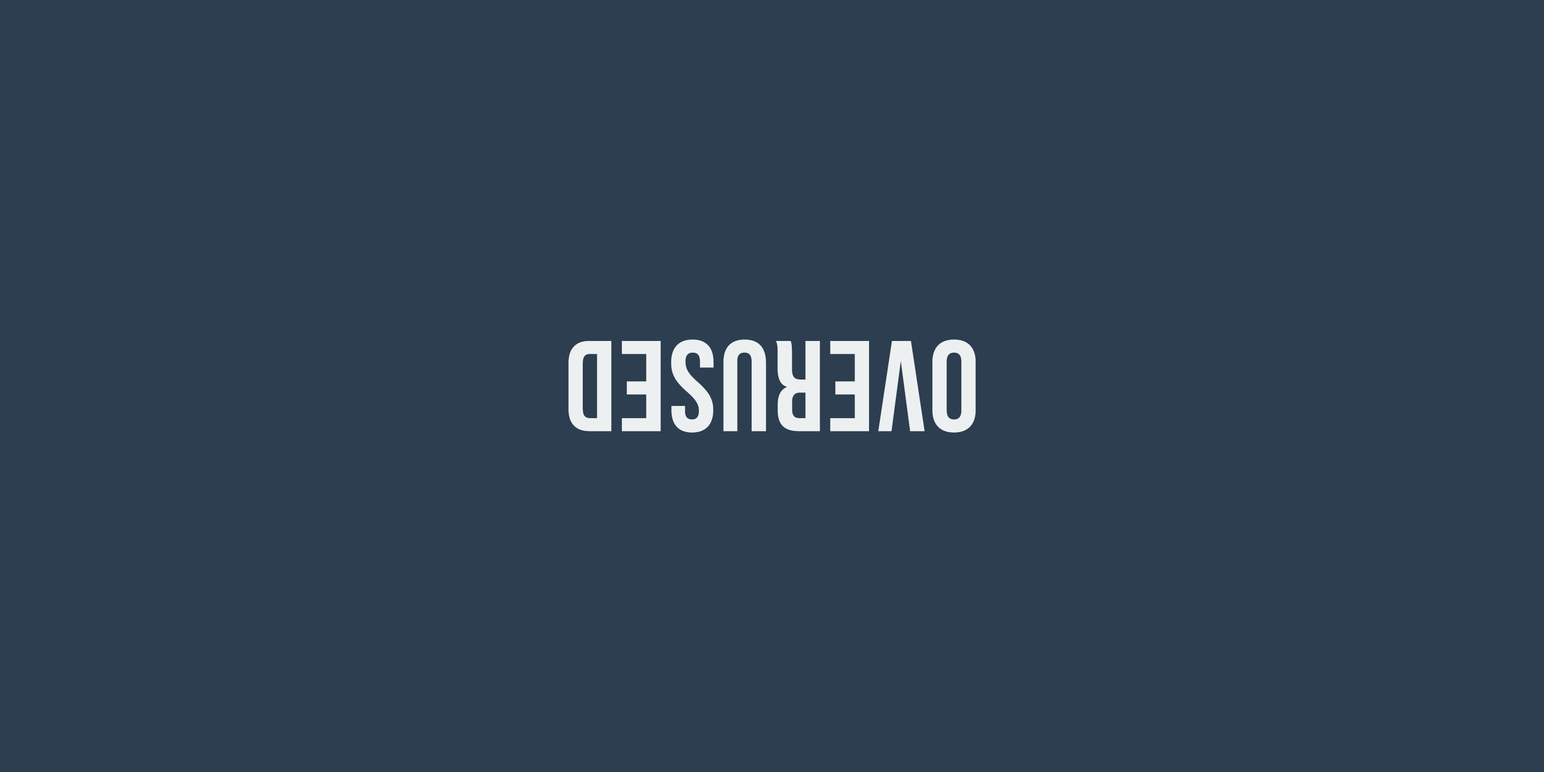
<style>
.page{position:relative;width:1544px;height:772px;background:#2c3e50}
.page>*{position:absolute;margin:0}
.t1{font:128.7px "BebasNeue-Regular";letter-spacing:0.02em;color:#ecf0f1}
</style>
<div class="page">
<p class="t1" style="left:568px;top:339px;width:408px;height:94px;rotate:180deg">overused</p>
</div>
